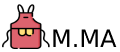
<style>
.page{position:relative;width:120px;height:52px;background:#ffffff}
.page>*{position:absolute;margin:0}
.t1{font:24px "DejaVuSans";color:#000000}
</style>
<div class="page">
<p class="t1" style="left:53px;top:29px;width:64px;height:18px">M.MA</p>
</div>
